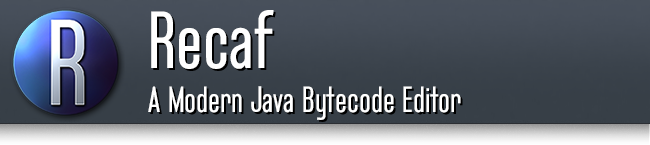
<style>
.page{position:relative;width:650px;height:145px}
.page>*{position:absolute;margin:0}
.t1{font:36px "BluefishDemo";color:#ffffff}
.t2{font:80px "BluefishDemo";color:#ffffff}
</style>
<div class="page">
<p class="t1" style="left:148px;top:10px;width:313px;height:110px"><span class="t2">Recaf <br></span>A Modern Java Bytecode Editor</p>
</div>
